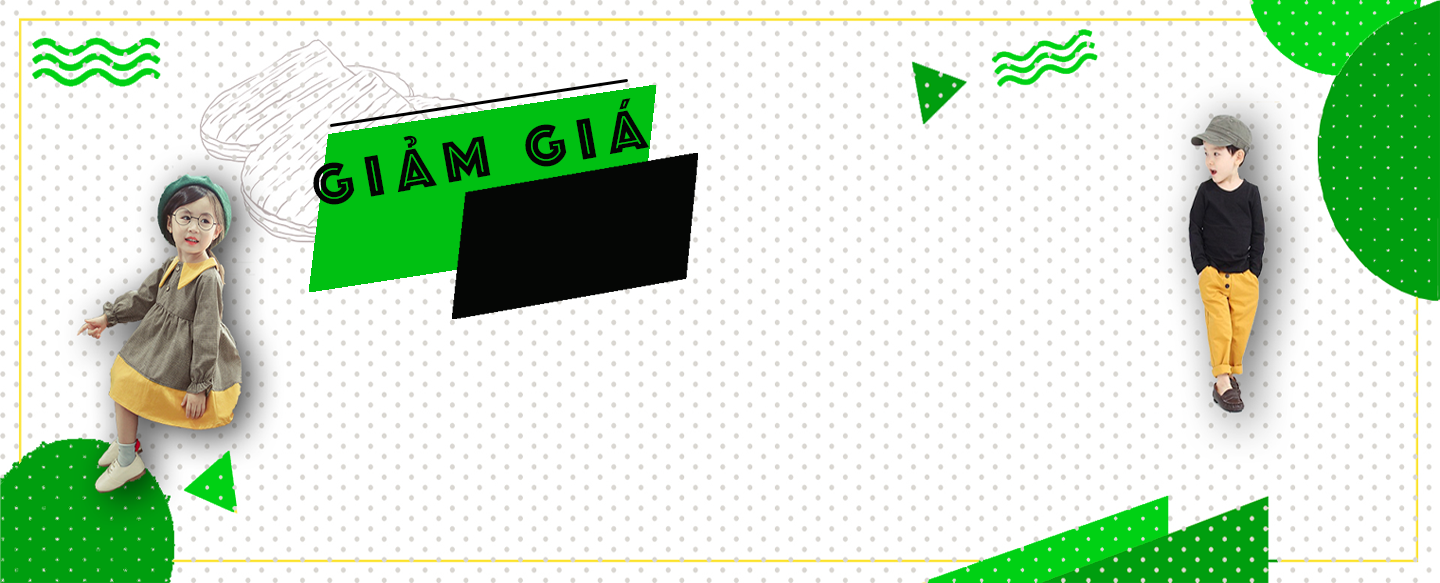
<style>
.page{position:relative;width:1440px;height:583px;background:#ffffff}
.page>*{position:absolute;margin:0}
.t1{font:60px "Phosphate-Inline";letter-spacing:0.2em;color:#040404;text-transform:uppercase}
</style>
<div class="page">
<p class="t1" style="left:313px;top:98px;width:336px;height:107px;rotate:-10deg">giảm giá</p>
</div>
